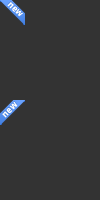
<style>
.page{position:relative;width:100px;height:200px;background:#333333}
.page>*{position:absolute;margin:0}
.t1{font:10px "KlavikaBold-Bold";letter-spacing:0.025em;color:#ffffff}
</style>
<div class="page">
<p class="t1" style="left:7px;top:2px;width:16px;height:15px;rotate:45deg">new</p>
<p class="t1" style="left:2px;top:101px;width:16px;height:17px;rotate:-45deg">new</p>
</div>
